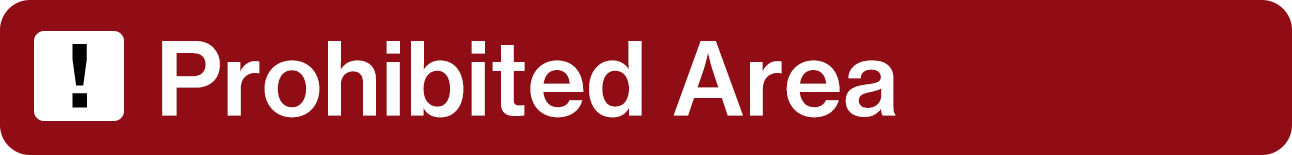
<style>
.page{position:relative;width:1292px;height:155px;background:#900d15}
.page>*{position:absolute;margin:0}
.t1{font:100px "NHaasGroteskTXPro-65Md";color:#ffffff}
</style>
<div class="page">
<p class="t1" style="left:162px;top:41px;width:734px;height:77px">Prohibited Area</p>
</div>
